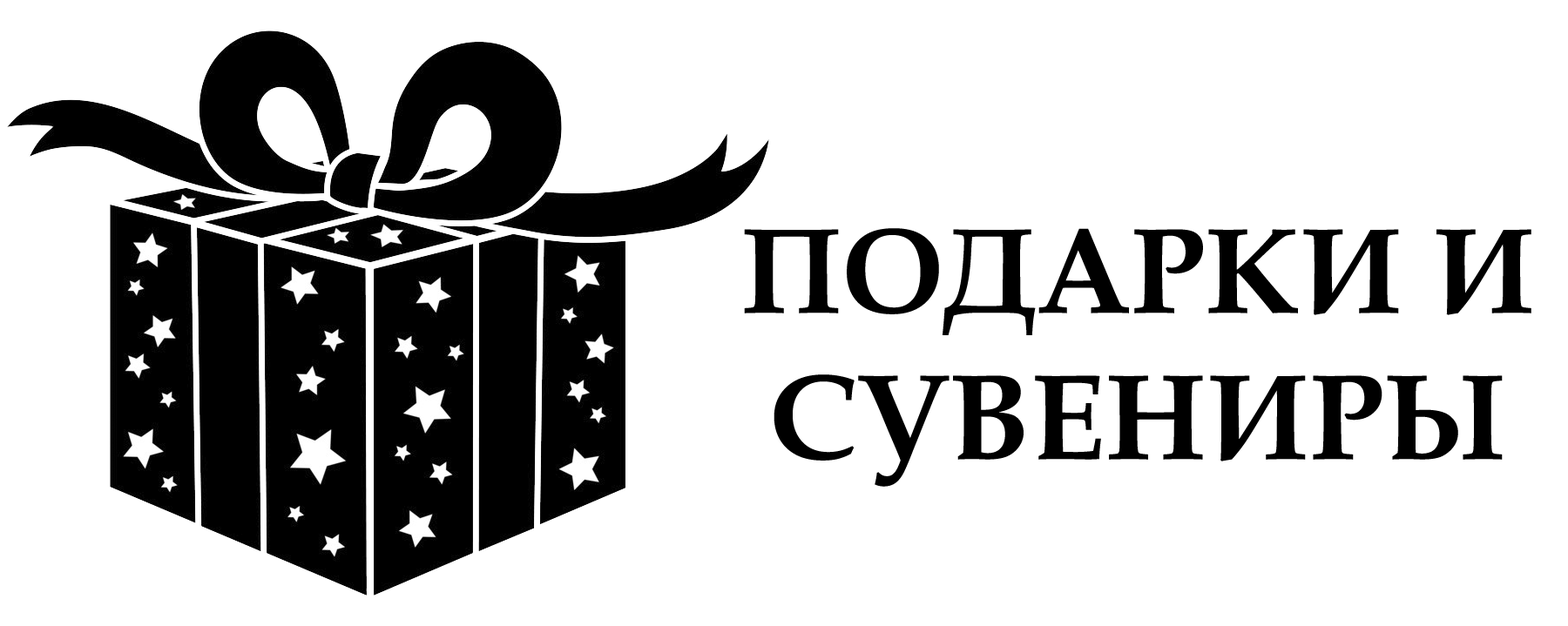
<style>
.page{position:relative;width:1568px;height:626px;background:#ffffff}
.page>*{position:absolute;margin:0}
.t1{font:122px "BookAntiqua-Bold";color:#000000}
</style>
<div class="page">
<p class="t1" style="left:744px;top:228px;width:787px;height:259px;text-align:center">ПОДАРКИ И СУВЕНИРЫ</p>
</div>
